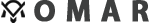
<style>
.page{position:relative;width:152px;height:23px;background:#ffffff}
.page>*{position:absolute;margin:0}
.t1{font:30px "MyriadPro-Bold";letter-spacing:0.31em;color:#3e3f3f;text-transform:uppercase;font-weight:bold}
</style>
<div class="page">
<p class="t1" style="left:34px;top:0px;width:115px;height:22px">OMAR</p>
</div>
